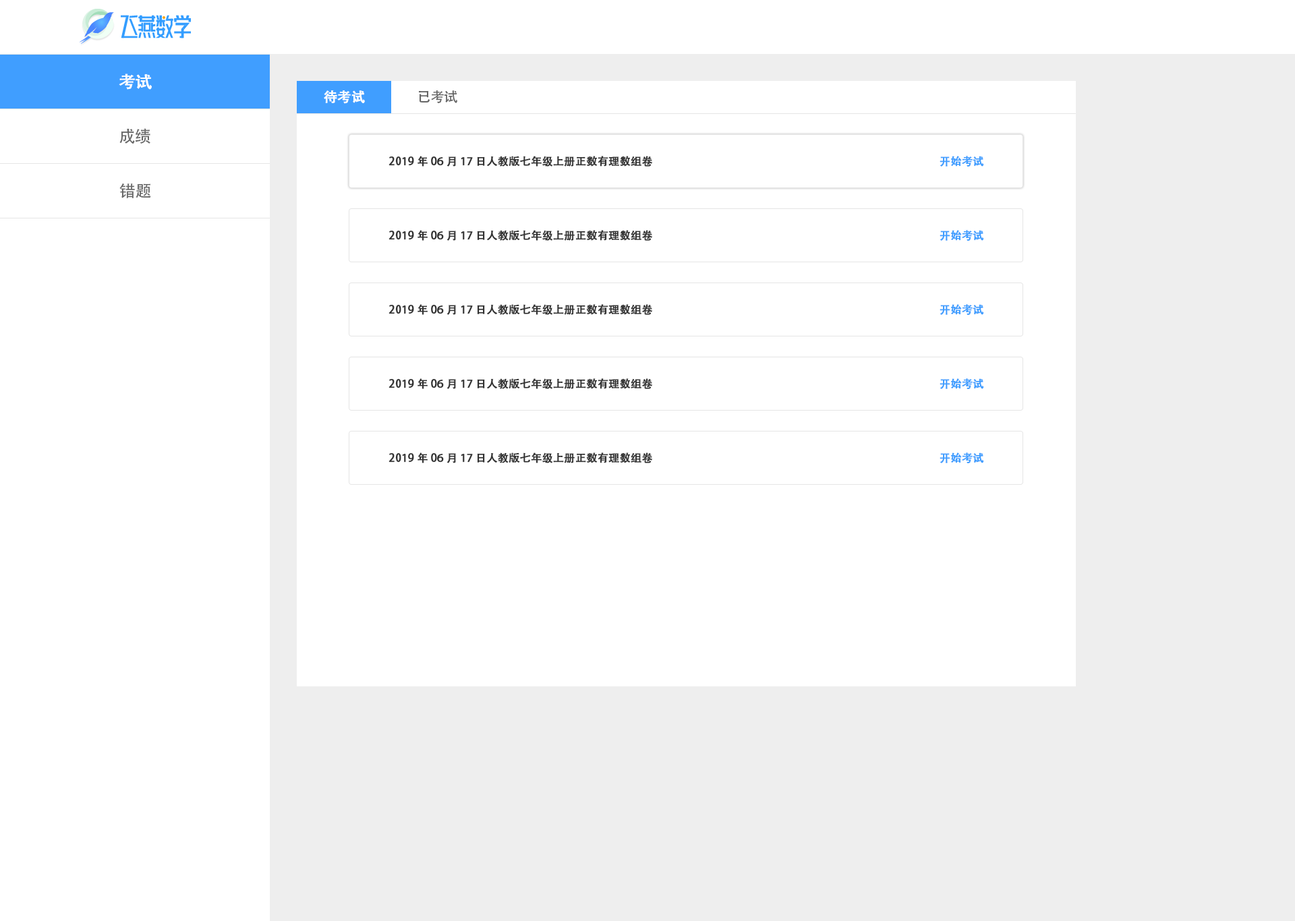
<style>
.page{position:relative;width:1295px;height:921px;background:#ffffff}
.page>*{position:absolute;margin:0}
.t1{font:16.2px "AdobeHeitiStd-Regular";color:#ffffff;font-weight:bold}
.t2{font:13.5px "AdobeHeitiStd-Regular";color:#ffffff;font-weight:bold}
.t3{font:13.5px "AdobeHeitiStd-Regular";color:#666666}
.t4{font:16.2px "AdobeHeitiStd-Regular";color:#666666}
.t5{font:10.8px "AdobeHeitiStd-Regular";color:#333333;font-weight:bold}
.t6{font:10.8px "AdobeHeitiStd-Regular";color:#409eff;font-weight:bold}
</style>
<div class="page">
<p class="t1" style="left:119px;top:73px;width:33px;height:17px">考试</p>
<p class="t2" style="left:324px;top:90px;width:41px;height:14px">待考试</p>
<p class="t3" style="left:419px;top:90px;width:38px;height:13px">已考试</p>
<p class="t4" style="left:119px;top:128px;width:31px;height:16px">成绩</p>
<p class="t5" style="left:388px;top:156px;width:265px;height:11px">2019年06月17日人教版七年级上册正数有理数组卷</p>
<p class="t6" style="left:939px;top:156px;width:45px;height:11px">开始考试</p>
<p class="t4" style="left:119px;top:183px;width:32px;height:15px">错题</p>
<p class="t5" style="left:388px;top:230px;width:265px;height:11px">2019年06月17日人教版七年级上册正数有理数组卷</p>
<p class="t6" style="left:939px;top:230px;width:45px;height:11px">开始考试</p>
<p class="t5" style="left:388px;top:304px;width:265px;height:11px">2019年06月17日人教版七年级上册正数有理数组卷</p>
<p class="t6" style="left:939px;top:304px;width:45px;height:12px">开始考试</p>
<p class="t5" style="left:388px;top:378px;width:265px;height:11px">2019年06月17日人教版七年级上册正数有理数组卷</p>
<p class="t6" style="left:939px;top:378px;width:45px;height:12px">开始考试</p>
<p class="t5" style="left:388px;top:452px;width:265px;height:11px">2019年06月17日人教版七年级上册正数有理数组卷</p>
<p class="t6" style="left:939px;top:452px;width:45px;height:12px">开始考试</p>
</div>
